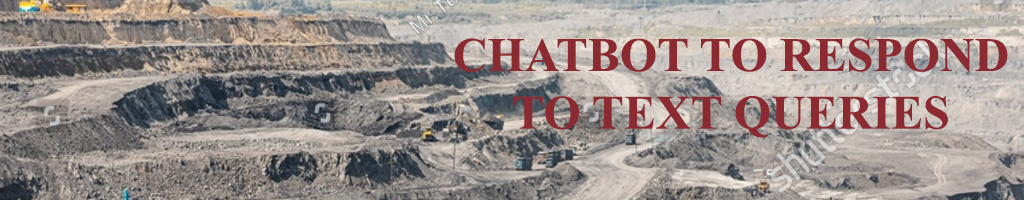
<style>
.page{position:relative;width:1024px;height:200px}
.page>*{position:absolute;margin:0}
.t1{font:48px "TimesNewRomanPS-BoldMT";color:#8c2a31}
</style>
<div class="page">
<p class="t1" style="left:454px;top:38px;width:554px;height:100px;text-align:center">CHATBOT TO RESPOND <br>TO TEXT QUERIES</p>
</div>
